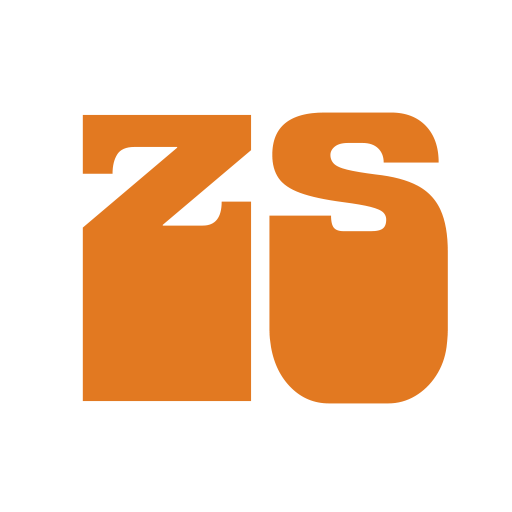
<style>
.page{position:relative;width:512px;height:512px;background:#ffffff}
.page>*{position:absolute;margin:0}
.t1{font:399.5px "Danfo-Regular";color:#e27921;scale:0.79 1}
</style>
<div class="page">
<p class="t1" style="left:82px;top:112px;width:366px;height:292px">ZS</p>
</div>
